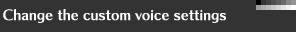
<style>
.page{position:relative;width:296px;height:32px;background:#333333}
.page>*{position:absolute;margin:0}
.t1{font:14px "ChiaroStd-B";color:#ffffff}
</style>
<div class="page">
<p class="t1" style="left:3px;top:9px;width:223px;height:14px">Change the custom voice settings</p>
</div>
